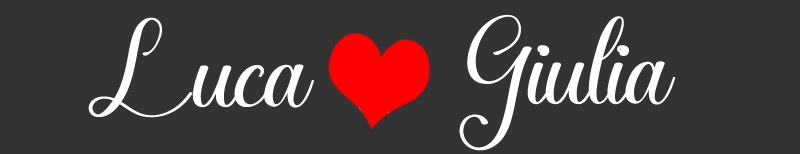
<style>
.page{position:relative;width:800px;height:154px;background:#333333}
.page>*{position:absolute;margin:0}
.t1{font:130px "TheQueenRegular";color:#ffffff}
</style>
<div class="page">
<p class="t1" style="left:88px;top:17px;width:226px;height:101px">Luca</p>
<p class="t1" style="left:459px;top:14px;width:217px;height:137px">Giulia</p>
</div>
